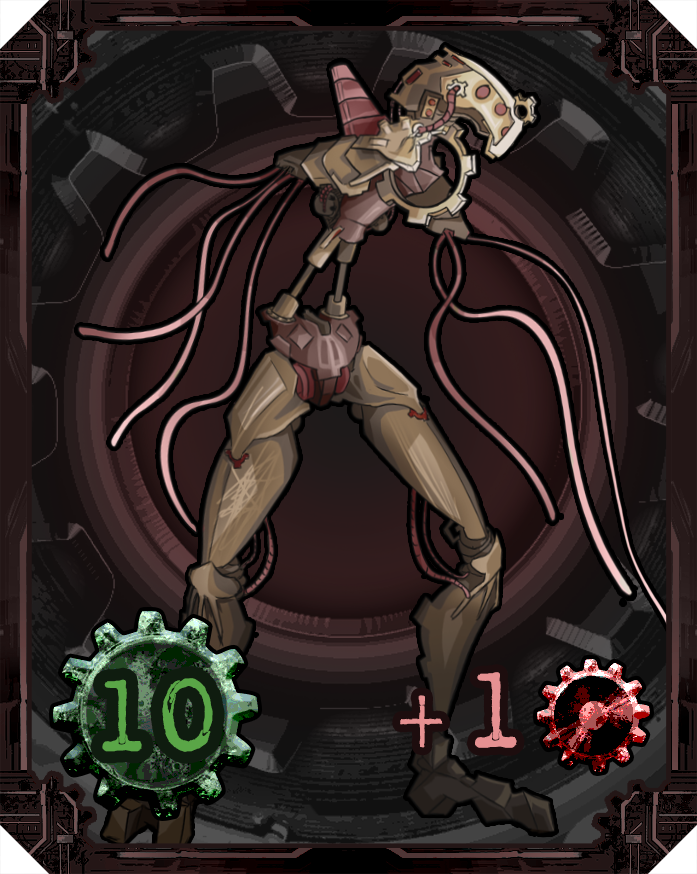
<style>
.page{position:relative;width:697px;height:874px}
.page>*{position:absolute;margin:0}
.t1{font:108.3px "AmerTypewriterITCbyBT-Medium";color:#5aa647}
.t2{font:85.8px "AmerTypewriterITCbyBT-Medium";color:#e69192}
.t3{font:114.4px "AmerTypewriterITCbyBT-Medium";color:#e69192}
</style>
<div class="page">
<p class="t1" style="left:102px;top:678px;width:111px;height:74px">10</p>
<p class="t2" style="left:400px;top:672px;width:117px;height:76px">+<span class="t3">1</span></p>
</div>
